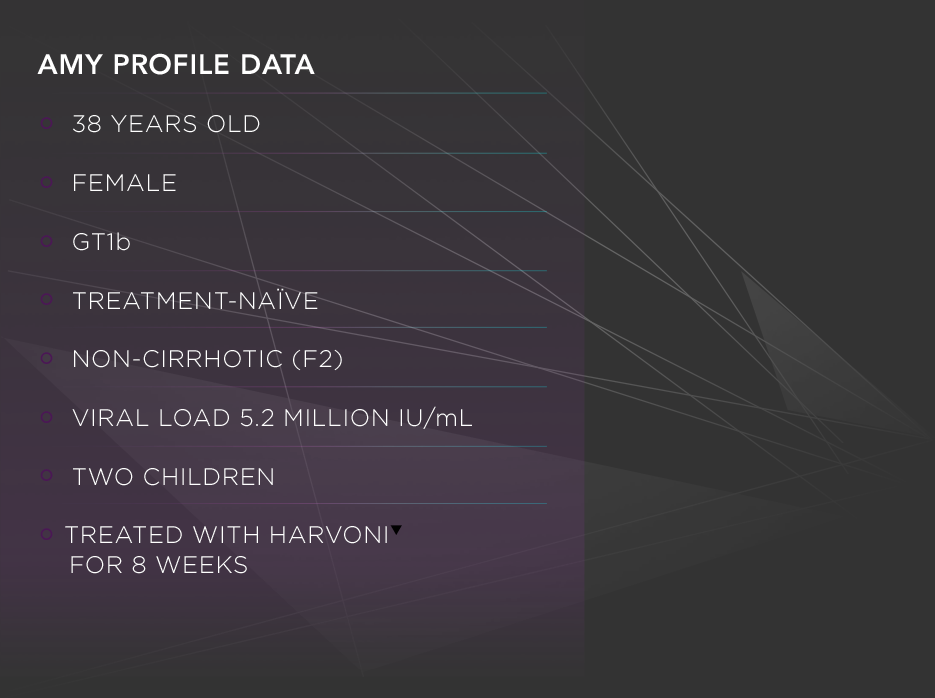
<style>
.page{position:relative;width:935px;height:698px;background:#333333}
.page>*{position:absolute;margin:0}
.t1{font:24px/30px "Gotham-Light";letter-spacing:0.025em;color:#ffffff;text-transform:uppercase}
.t2{font:28px/34.5px "Avenir-Heavy";letter-spacing:0.025em;color:#ffffff;text-transform:uppercase}
.t3{font:48px/30px "ArialMT";letter-spacing:0.025em;color:#4a1854;text-transform:uppercase}
.t4{font:24px/30px "Gotham-Light";letter-spacing:0.025em;color:#ffffff}
.t5{font:24px/30px "ZapfDingbatsITC";letter-spacing:0.025em;color:#010101;text-transform:uppercase}
</style>
<div class="page">
<p class="t1" style="left:37px;top:53px;width:435px;height:521px"><span class="t2">Amy profile data<br></span><span class="t3">◦ </span>38 years old<br><span class="t3">◦ </span>Female<br><span class="t3">◦ </span>GT1<span class="t4">b<br></span><span class="t3">◦ </span>Treatment-naïve<br><span class="t3">◦ </span>Non-cirrhotic (F2)<br><span class="t3">◦ </span>Viral load 5.2 million IU/<span class="t4">m</span>L<br><span class="t3">◦ </span>Two children<br><span class="t3">◦ </span>treated with HARVONI<span class="t5">▼</span> <br>    for 8 weeks</p>
</div>
